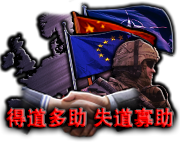
<style>
.page{position:relative;width:180px;height:166px;background:#ffffff}
.page>*{position:absolute;margin:0}
.t1{font:19.9px "AdobeHeitiStd-Regular";font-weight:bold}
</style>
<div class="page">
<p class="t1" style="left:6px;top:108px;width:167px;height:20px">得道多助 失道寡助</p>
</div>
